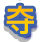
<style>
.page{position:relative;width:42px;height:42px;background:#ffffff}
.page>*{position:absolute;margin:0}
.t1{font:30.7px "PingFangHK-Semibold";color:#ffc400;text-transform:uppercase}
</style>
<div class="page">
<p class="t1" style="left:6px;top:5px;width:28px;height:29px">夺</p>
</div>
